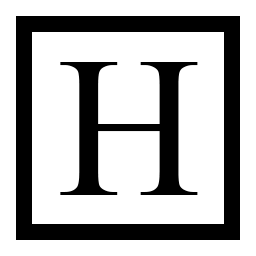
<style>
.page{position:relative;width:256px;height:256px;background:#ffffff}
.page>*{position:absolute;margin:0}
.t1{font:200px "TimesNewRomanPSMT";color:#000000}
</style>
<div class="page">
<p class="t1" style="left:60px;top:62px;width:138px;height:133px">H</p>
</div>
